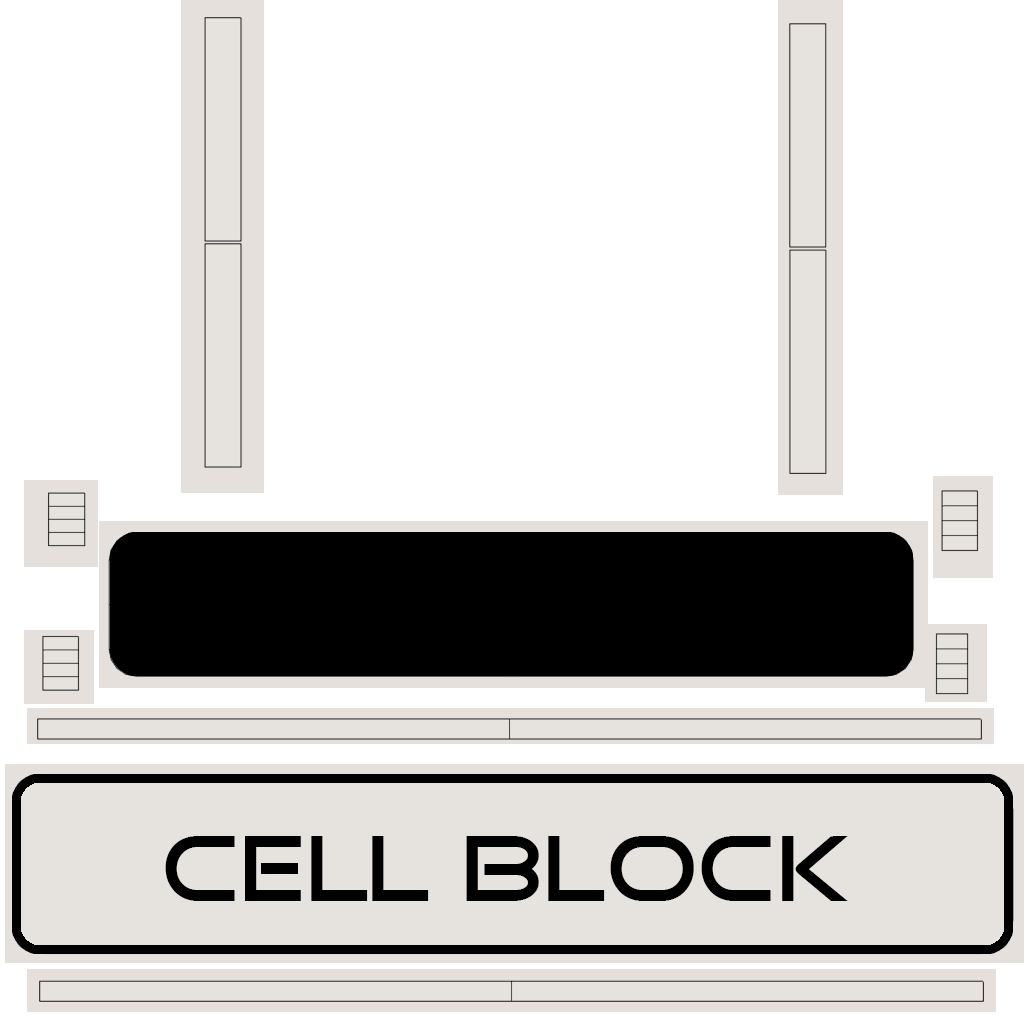
<style>
.page{position:relative;width:1024px;height:1024px;background:#ffffff}
.page>*{position:absolute;margin:0}
.t1{font:90px "GoodTimes";color:#000000}
</style>
<div class="page">
<p class="t1" style="left:165px;top:836px;width:683px;height:65px">Cell block</p>
</div>
